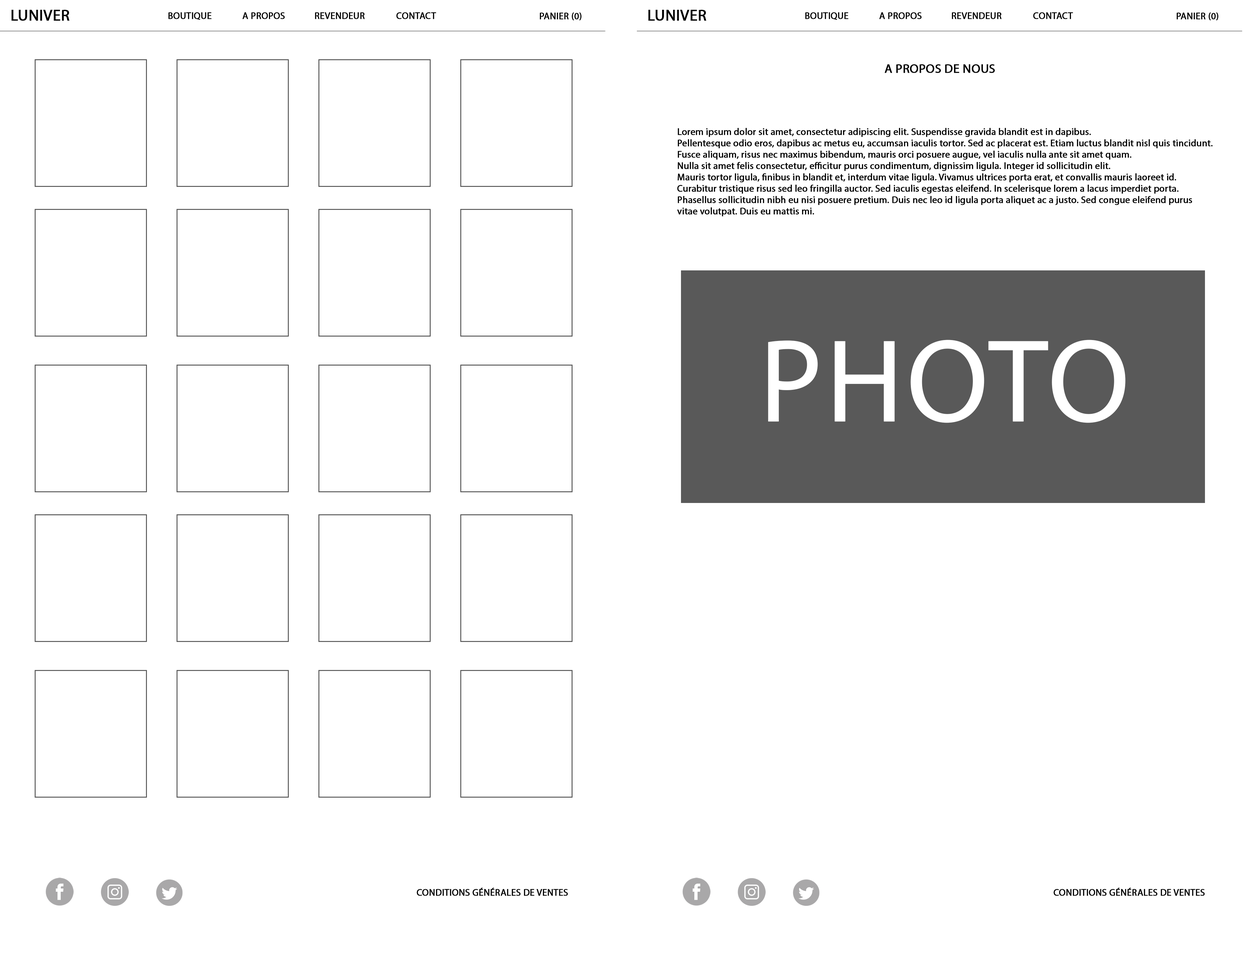
<style>
.page{position:relative;width:1251px;height:953px;background:#ffffff}
.page>*{position:absolute;margin:0}
.t1{font:15.8px "MyriadPro-Regular";color:#000000;font-weight:bold}
.t2{font:9.5px "MyriadPro-Regular";color:#000000;font-weight:bold}
.t3{font:12.6px "MyriadPro-Regular";color:#000000;font-weight:bold}
.t4{font:118.9px "MyriadPro-Regular";color:#ffffff;font-weight:bold}
</style>
<div class="page">
<p class="t1" style="left:11px;top:10px;width:59px;height:11px">LUNIVER</p>
<p class="t2" style="left:168px;top:12px;width:44px;height:8px">BOUTIQUE</p>
<p class="t2" style="left:242px;top:12px;width:43px;height:7px">A PROPOS</p>
<p class="t2" style="left:315px;top:12px;width:50px;height:7px">REVENDEUR</p>
<p class="t2" style="left:396px;top:12px;width:40px;height:7px">CONTACT</p>
<p class="t2" style="left:540px;top:12px;width:42px;height:8px">PANIER (0)</p>
<p class="t1" style="left:648px;top:10px;width:58px;height:11px">LUNIVER</p>
<p class="t2" style="left:805px;top:12px;width:43px;height:8px">BOUTIQUE</p>
<p class="t2" style="left:879px;top:12px;width:42px;height:7px">A PROPOS</p>
<p class="t2" style="left:952px;top:12px;width:50px;height:7px">REVENDEUR</p>
<p class="t2" style="left:1033px;top:12px;width:40px;height:7px">CONTACT</p>
<p class="t2" style="left:1176px;top:12px;width:42px;height:8px">PANIER (0)</p>
<p class="t3" style="left:885px;top:64px;width:110px;height:9px">A PROPOS DE NOUS</p>
<p class="t2" style="left:677px;top:128px;width:535px;height:89px">Lorem ipsum dolor sit amet, consectetur adipiscing elit. Suspendisse gravida blandit est in dapibus. <br>Pellentesque odio eros, dapibus ac metus eu, accumsan iaculis tortor. Sed ac placerat est. Etiam luctus blandit nisl quis tincidunt. <br>Fusce aliquam, risus nec maximus bibendum, mauris orci posuere augue, vel iaculis nulla ante sit amet quam. <br>Nulla sit amet felis consectetur, efficitur purus condimentum, dignissim ligula. Integer id sollicitudin elit. <br>Mauris tortor ligula, finibus in blandit et, interdum vitae ligula. Vivamus ultrices porta erat, et convallis mauris laoreet id. <br>Curabitur tristique risus sed leo fringilla auctor. Sed iaculis egestas eleifend. In scelerisque lorem a lacus imperdiet porta. <br>Phasellus sollicitudin nibh eu nisi posuere pretium. Duis nec leo id ligula porta aliquet ac a justo. Sed congue eleifend purus <br>vitae volutpat. Duis eu mattis mi.</p>
<p class="t4" style="left:768px;top:340px;width:357px;height:83px">PHOTO</p>
<p class="t2" style="left:417px;top:888px;width:151px;height:8px">CONDITIONS GÉNÉRALES DE VENTES</p>
<p class="t2" style="left:1054px;top:888px;width:151px;height:8px">CONDITIONS GÉNÉRALES DE VENTES</p>
</div>
